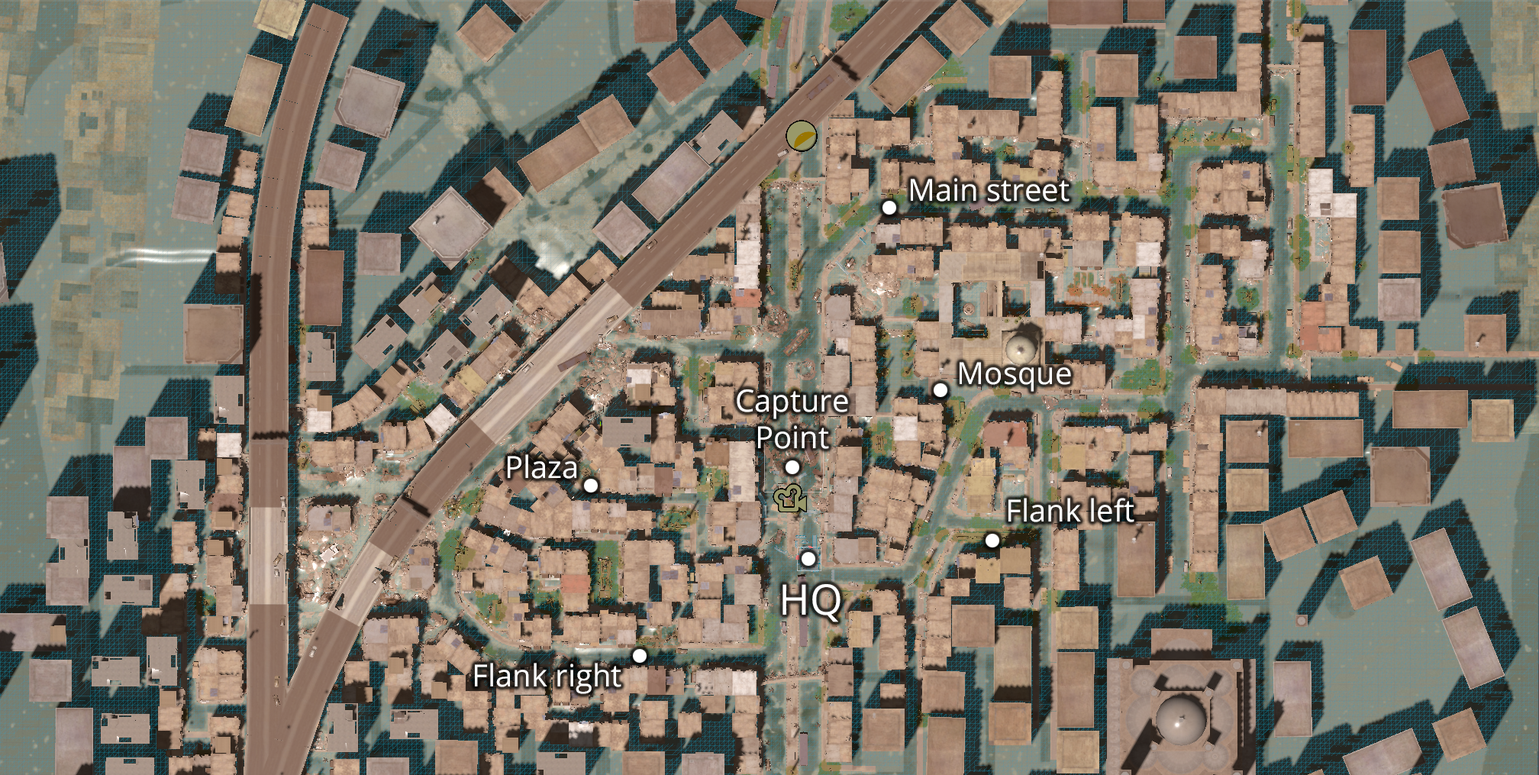
<style>
.page{position:relative;width:1539px;height:775px}
.page>*{position:absolute;margin:0}
.t1{font:30.5px "OpenSans-Regular";color:#ffffff}
.t2{font:42px "OpenSans-Regular";color:#ffffff}
</style>
<div class="page">
<p class="t1" style="left:911px;top:178px;width:158px;height:24px">Main street</p>
<p class="t1" style="left:960px;top:362px;width:111px;height:30px">Mosque</p>
<p class="t1" style="left:737px;top:389px;width:111px;height:60px;text-align:center">Capture<br>Point</p>
<p class="t1" style="left:508px;top:454px;width:68px;height:25px">Plaza</p>
<p class="t1" style="left:1008px;top:498px;width:126px;height:24px">Flank left</p>
<p class="t2" style="left:782px;top:584px;width:58px;height:38px">HQ</p>
<p class="t1" style="left:475px;top:663px;width:146px;height:31px">Flank right</p>
</div>
